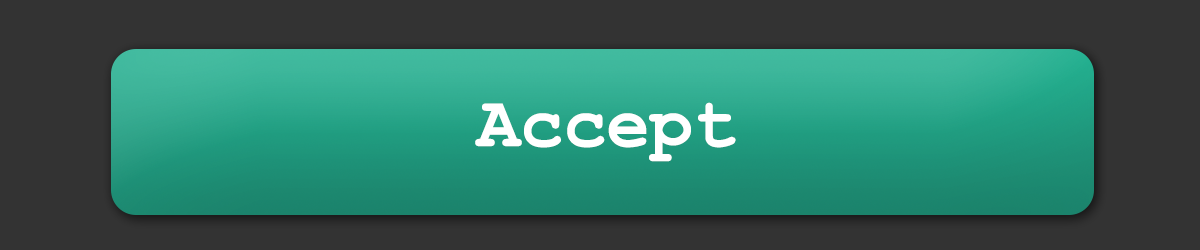
<style>
.page{position:relative;width:1200px;height:250px;background:#333333}
.page>*{position:absolute;margin:0}
.t1{font:72px "CourierNewPS-BoldMT";color:#ffffff}
</style>
<div class="page">
<p class="t1" style="left:475px;top:102px;width:261px;height:60px">Accept</p>
</div>
